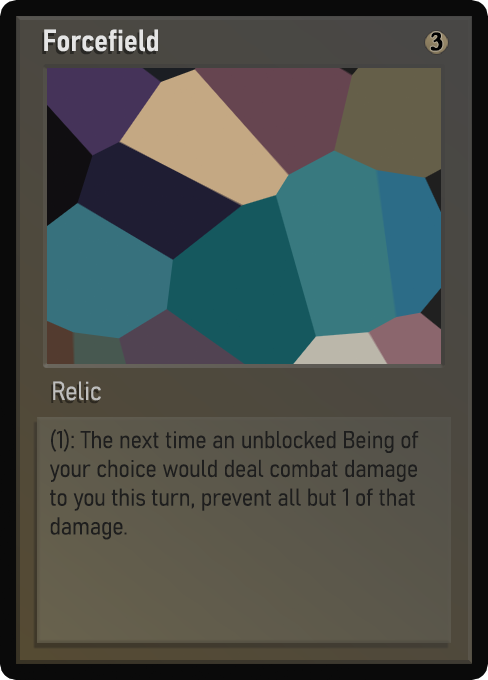
<style>
.page{position:relative;width:488px;height:680px}
.page>*{position:absolute;margin:0}
.t1{font:30px "Bahnschrift-SemiBoldSemiCondensed";color:#f2f2f2;font-weight:bold}
.t2{font:25px "WTRRoycroft";color:#000000;font-weight:bold;scale:1.09 1}
.t3{font:26px "Bahnschrift-LightSemiCondensed";color:#c8c8c8;font-weight:bold}
.t4{font:24px "Bahnschrift-LightSemiCondensed";color:#1e1e1e;font-weight:bold}
</style>
<div class="page">
<p class="t1" style="left:44px;top:29px;width:114px;height:23px;opacity:0.9">Forcefield</p>
<p class="t2" style="left:430px;top:32px;width:13px;height:19px">3</p>
<p class="t3" style="left:53px;top:381px;width:48px;height:20px;opacity:0.9">Relic</p>
<p class="t4" style="left:50px;top:429px;width:369px;height:111px">(1): The next time an unblocked Being of your choice would deal combat damage to you this turn, prevent all but 1 of that damage.</p>
</div>
